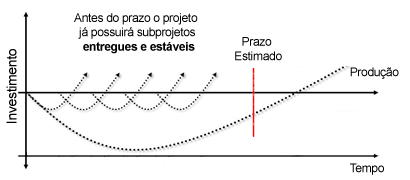
<style>
.page{position:relative;width:410px;height:180px;background:#ffffff}
.page>*{position:absolute;margin:0}
.t1{font:12px "ArialMT";letter-spacing:-0.025em;color:#010101}
.t2{font:12px "Arial-BoldMT";letter-spacing:-0.025em;color:#010101}
.t3{font:14px "ArialMT";letter-spacing:-0.025em;color:#010101}
</style>
<div class="page">
<p class="t1" style="left:74px;top:13px;width:124px;height:41px;text-align:center">Antes do prazo o projeto <br>já possuirá subprojetos<br><span class="t2"> entregues e estáveis</span></p>
<p class="t1" style="left:235px;top:37px;width:47px;height:24px;text-align:center">Prazo <br>Estimado</p>
<p class="t3" style="left:6px;top:49px;width:11px;height:74px;rotate:-90deg">Investimento</p>
<p class="t1" style="left:350px;top:67px;width:49px;height:12px">Produção</p>
<p class="t1" style="left:350px;top:163px;width:34px;height:12px">Tempo</p>
</div>
